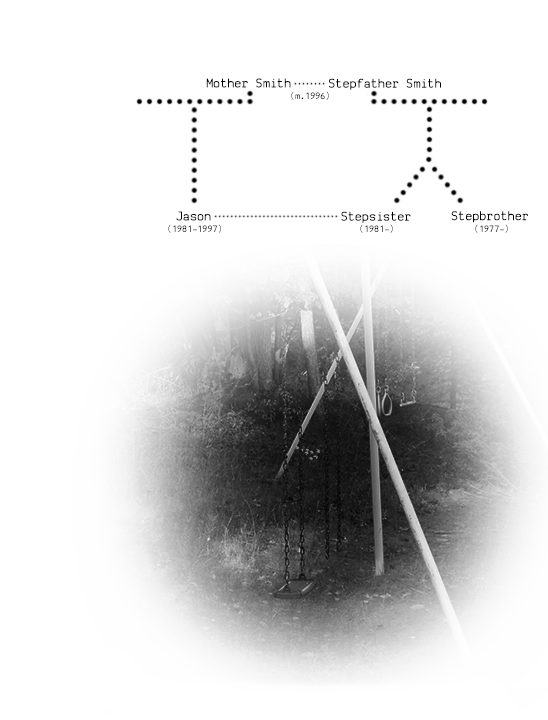
<style>
.page{position:relative;width:548px;height:720px;background:#ffffff}
.page>*{position:absolute;margin:0}
.t1{font:14px "SVBasicManual";color:#000000}
</style>
<div class="page">
<p class="t1" style="left:206px;top:78px;width:85px;height:10px">Mother Smith</p>
<p class="t1" style="left:329px;top:78px;width:112px;height:12px">Stepfather Smith</p>
<p class="t1" style="left:176px;top:211px;width:35px;height:10px">Jason</p>
<p class="t1" style="left:341px;top:211px;width:70px;height:12px">Stepsister</p>
<p class="t1" style="left:451px;top:211px;width:77px;height:12px">Stepbrother</p>
</div>
